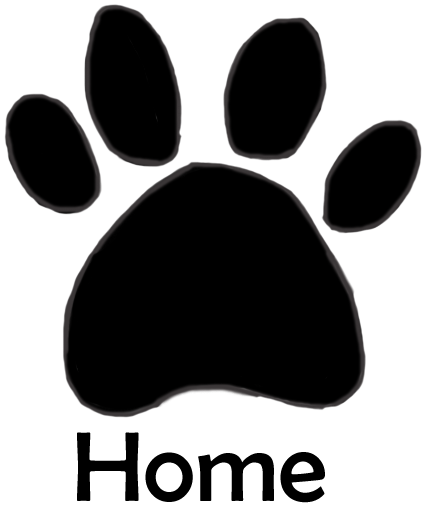
<style>
.page{position:relative;width:430px;height:510px;background:#ffffff}
.page>*{position:absolute;margin:0}
.t1{font:100px "BerlinSansFB-Reg";color:#000000}
</style>
<div class="page">
<p class="t1" style="left:77px;top:432px;width:248px;height:71px">Home</p>
</div>
